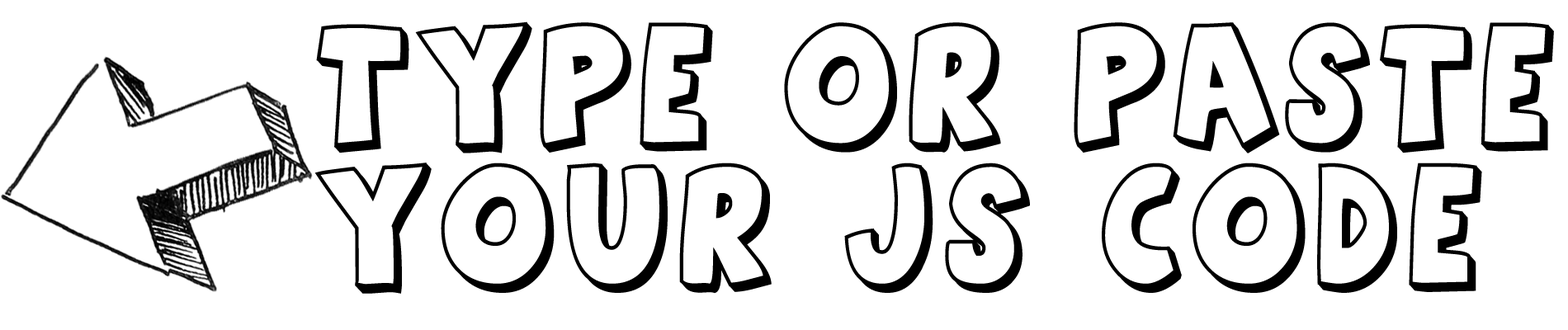
<style>
.page{position:relative;width:1568px;height:330px;background:#ffffff}
.page>*{position:absolute;margin:0}
.t1{font:117.2px "AgentOrange";letter-spacing:0.08em;color:#000000;scale:0.9 1}
</style>
<div class="page">
<p class="t1" style="left:314px;top:21px;width:1240px;height:273px">TYPE or paste<br>your Js code</p>
</div>
